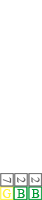
<style>
.page{position:relative;width:42px;height:200px;background:#ffffff}
.page>*{position:absolute;margin:0}
.t1{font:12px "TimesNewRomanPSMT";color:#646464}
.t2{font:12px "TimesNewRomanPSMT";color:#fff335}
.t3{font:12px "TimesNewRomanPSMT";color:#009933}
</style>
<div class="page">
<p class="t1" style="left:2px;top:177px;width:10px;height:6px;rotate:90deg">7</p>
<p class="t1" style="left:17px;top:177px;width:9px;height:6px;rotate:90deg">2</p>
<p class="t1" style="left:31px;top:177px;width:9px;height:6px;rotate:90deg">2</p>
<p class="t2" style="left:2px;top:189px;width:10px;height:9px">G</p>
<p class="t3" style="left:17px;top:189px;width:8px;height:9px">B</p>
<p class="t3" style="left:31px;top:189px;width:9px;height:9px">B</p>
</div>
